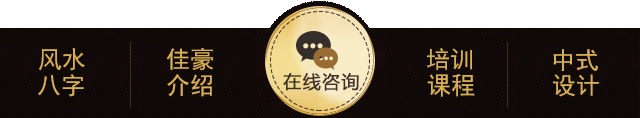
<style>
.page{position:relative;width:640px;height:118px;background:#ffffff}
.page>*{position:absolute;margin:0}
.t1{font:24px "SimHei";color:#d8af53}
</style>
<div class="page">
<p class="t1" style="left:39px;top:48px;width:46px;height:23px">风水</p>
<p class="t1" style="left:166px;top:48px;width:48px;height:23px">佳豪</p>
<p class="t1" style="left:426px;top:48px;width:46px;height:22px">培训</p>
<p class="t1" style="left:553px;top:49px;width:45px;height:22px">中式</p>
<p class="t1" style="left:38px;top:74px;width:46px;height:23px">八字</p>
<p class="t1" style="left:167px;top:74px;width:45px;height:23px">介绍</p>
<p class="t1" style="left:427px;top:74px;width:48px;height:23px">课程</p>
<p class="t1" style="left:553px;top:74px;width:46px;height:23px">设计</p>
</div>
